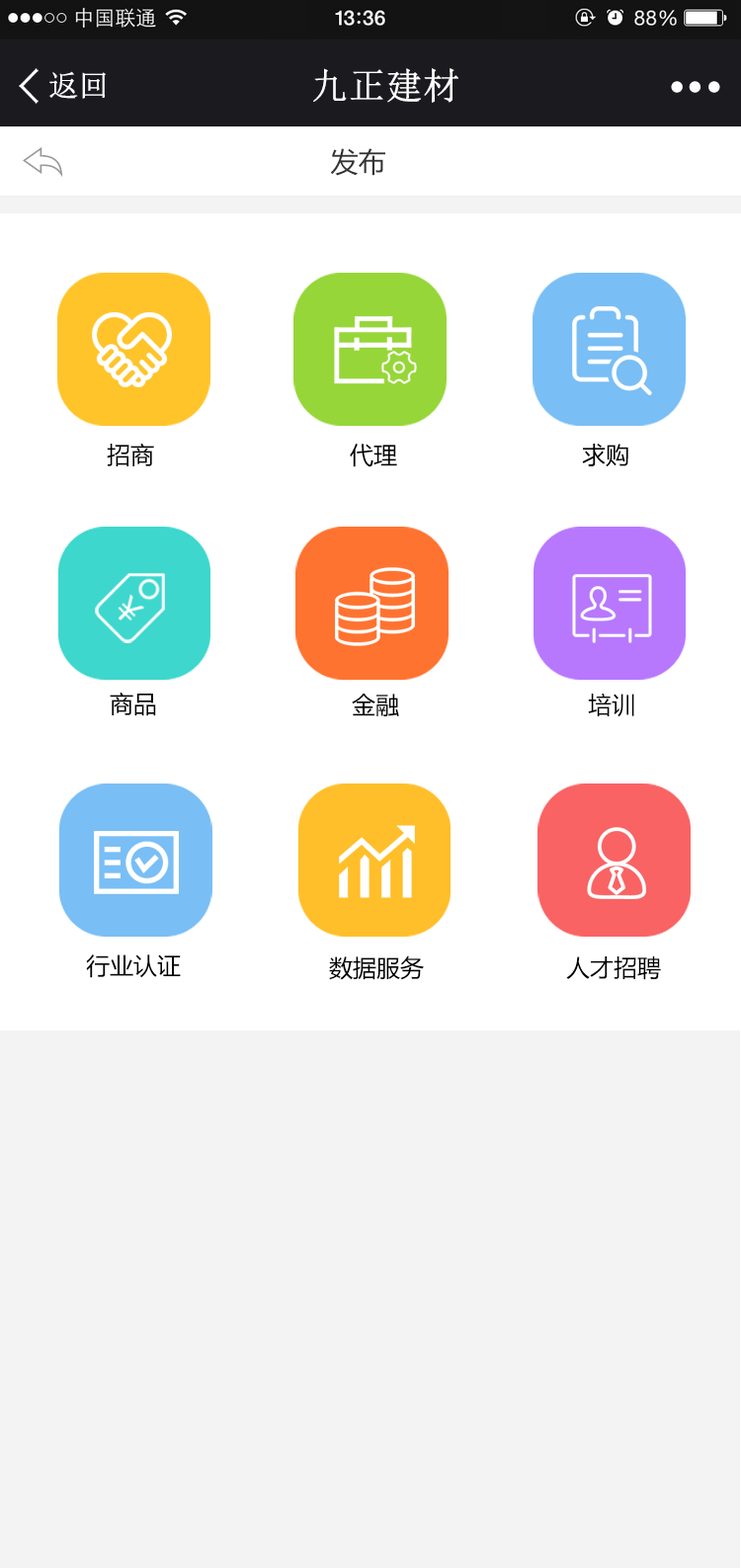
<style>
.page{position:relative;width:741px;height:1568px;background:#ffffff}
.page>*{position:absolute;margin:0}
.t1{font:29.6px "NSimSun";color:#ffffff;font-weight:bold}
.t2{font:36.2px "NSimSun";color:#ffffff;font-weight:bold}
.t3{font:27.7px "MicrosoftYaHei";color:#333333}
.t4{font:27.7px "MicrosoftYaHei";color:#333333;font-weight:bold}
.t5{font:23.7px "MicrosoftYaHei";color:#000000}
</style>
<div class="page">
<p class="t1" style="left:49px;top:71px;width:57px;height:28px">返回</p>
<p class="t2" style="left:313px;top:68px;width:145px;height:35px">九正建材</p>
<p class="t3" style="left:330px;top:148px;width:55px;height:28px"><span class="t4"><br></span>发布</p>
<p class="t5" style="left:107px;top:443px;width:47px;height:23px">招商</p>
<p class="t5" style="left:350px;top:444px;width:47px;height:23px">代理</p>
<p class="t5" style="left:582px;top:444px;width:46px;height:23px">求购</p>
<p class="t5" style="left:110px;top:692px;width:46px;height:24px">商品</p>
<p class="t5" style="left:352px;top:694px;width:47px;height:22px">金融</p>
<p class="t5" style="left:588px;top:693px;width:46px;height:24px">培训</p>
<p class="t5" style="left:86px;top:954px;width:95px;height:24px">行业认证</p>
<p class="t5" style="left:329px;top:955px;width:95px;height:25px">数据服务</p>
<p class="t5" style="left:566px;top:956px;width:95px;height:24px">人才招聘</p>
</div>
